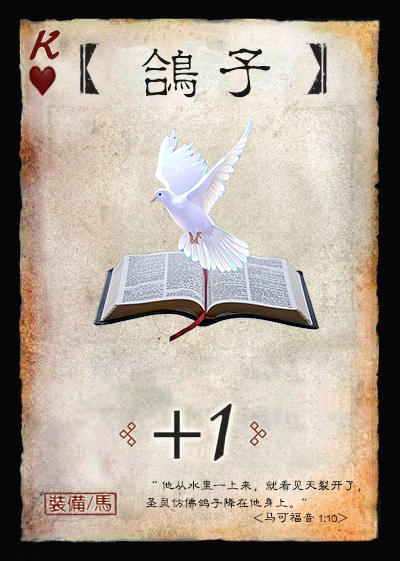
<style>
.page{position:relative;width:400px;height:561px}
.page>*{position:absolute;margin:0}
.t1{font:50px "Jxixinkai";color:#661213;font-weight:bold;font-style:italic}
.t2{font:60px "¾­µä·±½ÇÁ¥ Regular";letter-spacing:0.25em;color:#161616}
.t3{font:13px/17.5px "FZLBJW--GB1-0";color:#161616}
.t4{font:13px "FZLBJW--GB1-0";color:#161616}
</style>
<div class="page">
<p class="t1" style="left:30px;top:30px;width:30px;height:30px">K</p>
<p class="t2" style="left:141px;top:48px;width:130px;height:50px">鸽子</p>
<p class="t3" style="left:146px;top:480px;width:215px;height:29px">“ 他从水里一上来，就看见天裂开了，<br>圣灵仿佛鸽子降在他身上。”</p>
<p class="t4" style="left:253px;top:512px;width:95px;height:11px">&lt;马可福音 1:10&gt;</p>
</div>
